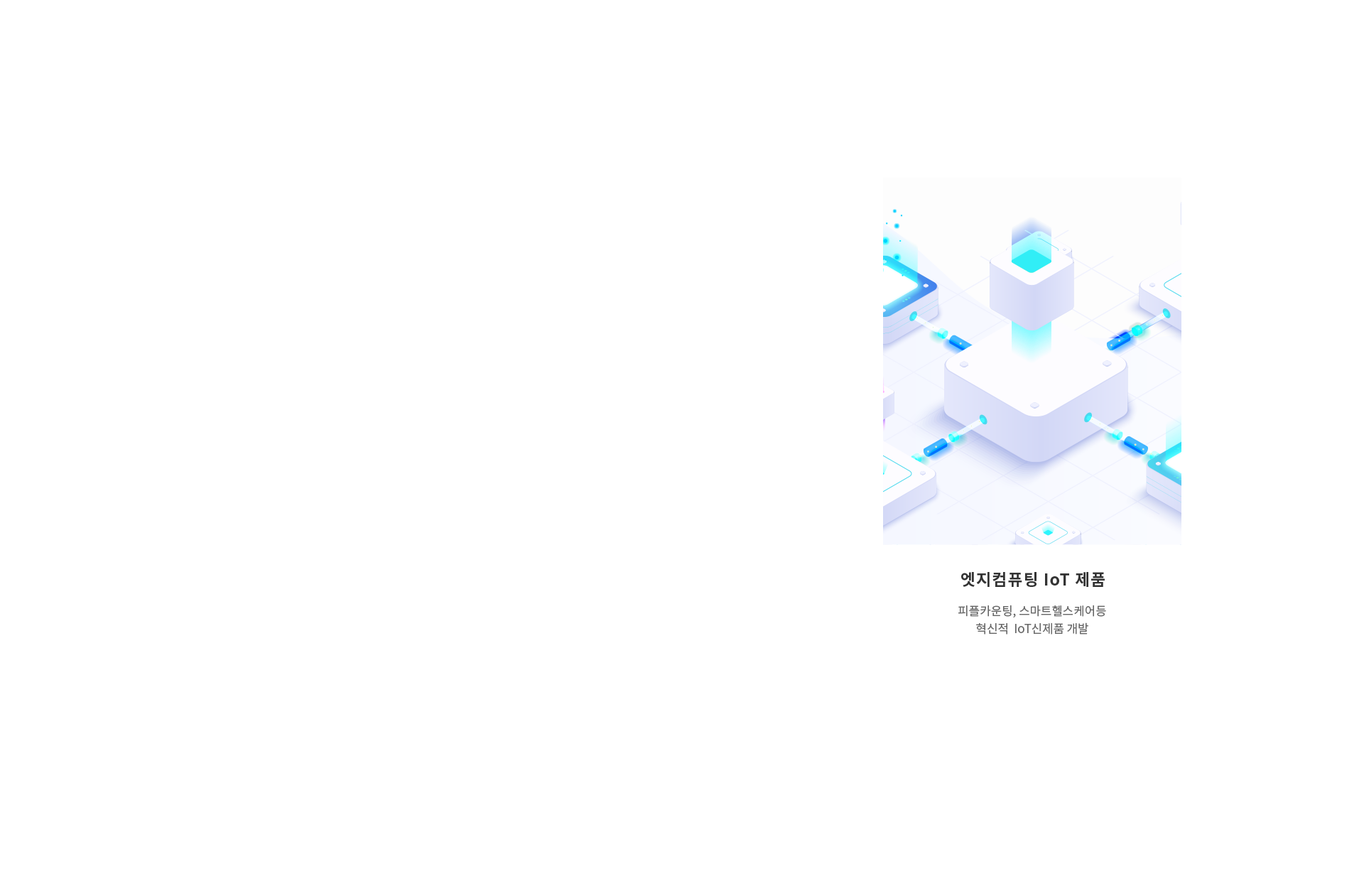
<style>
.page{position:relative;width:1364px;height:874px;background:#ffffff}
.page>*{position:absolute;margin:0}
.t1{font:16.2px "NotoSansCJKkr-Bold";letter-spacing:0.05em;color:#333333}
.t2{font:11.9px/17.9px "NotoSansCJKkr-Regular";color:#666666}
</style>
<div class="page">
<p class="t1" style="left:961px;top:572px;width:144px;height:15px">엣지컴퓨팅 IoT 제품</p>
<p class="t2" style="left:959px;top:605px;width:147px;height:30px;text-align:center">피플카운팅, 스마트헬스케어등<br>혁신적  IoT신제품 개발</p>
</div>
